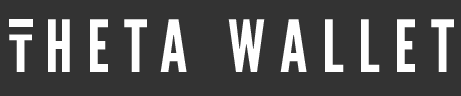
<style>
.page{position:relative;width:461px;height:96px;background:#333333}
.page>*{position:absolute;margin:0}
.t1{font:71.8px "LeagueGothic-Regular";letter-spacing:0.2em;color:#ffffff;text-transform:uppercase}
.t2{font:51px "LeagueGothic-Regular";letter-spacing:0.2em;color:#ffffff;text-transform:uppercase;scale:1.43 1}
</style>
<div class="page">
<p class="t1" style="left:48px;top:19px;width:406px;height:53px">heta wallet</p>
<p class="t2" style="left:9px;top:34px;width:23px;height:38px">t</p>
</div>
